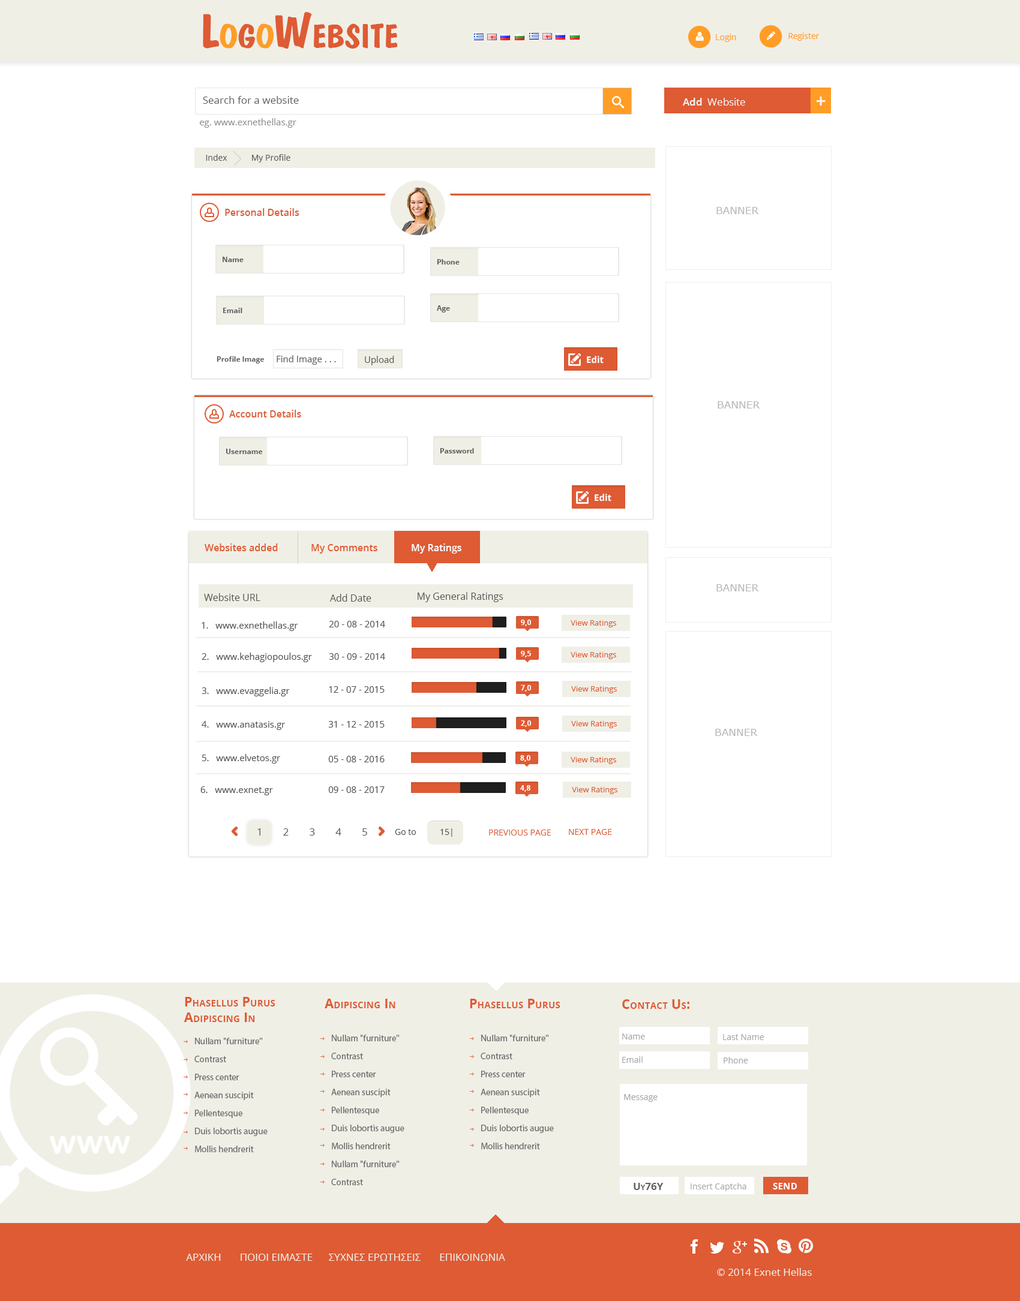
<style>
.page{position:relative;width:1020px;height:1301px;background:#ffffff}
.page>*{position:absolute;margin:0}
.t1{font:48px "DomkratBold";color:#de5b34;font-variant:small-caps}
.t2{font:48px "DomkratBold";color:#ff9d26;font-variant:small-caps}
.t3{font:8.4px "OpenSans";color:#ff9d26}
.t4{font:10.2px "OpenSans";color:#5e5d5d}
.t5{font:10.2px "OpenSans";color:#f5f5f5}
.t6{font:10.2px "OpenSans-Semibold";color:#f5f5f5}
.t7{font:13.2px "Verdana-Bold";color:#f5f5f5}
.t8{font:9px "OpenSans";color:#919090}
.t9{font:8.4px "OpenSans";color:#5e5d5d}
.t10{font:9.6px "OpenSans-Semibold";color:#de5b34}
.t11{font:10.2px "Verdana";color:#b8b8b8;text-transform:uppercase}
.t12{font:7.2px "OpenSans-Bold";color:#5e5b5b}
.t13{font:9px "OpenSans";color:#5e5b5b}
.t14{font:9px "OpenSans-Bold";color:#ffffff}
.t15{font:9.6px "OpenSans-Semibold";color:#ffffff}
.t16{font:9.6px "OpenSans";color:#535252}
.t17{font:9px "OpenSans";color:#535252}
.t18{font:7.2px "OpenSans-Bold";color:#ffffff}
.t19{font:7.8px "OpenSans";color:#de5b34}
.t20{font:10.2px "OpenSans";letter-spacing:2em;color:#545353}
.t21{font:8.4px "OpenSans";color:#545353}
.t22{font:8.4px "OpenSans";color:#de5b34}
.t23{font:13.2px "OpenSans-Bold";color:#de5b34;font-variant:small-caps}
.t24{font:9px/18px "MyriadPro-Regular";color:#6b6b6b}
.t25{font:8.4px "OpenSans";color:#a9a7a7}
.t26{font:10.2px "OpenSans-Bold";color:#625f5f;font-variant:small-caps}
.t27{font:13.2px "OpenSans-Bold";color:#ffffff;font-variant:small-caps}
.t28{font:10.2px "OpenSans";color:#f0efe6}
</style>
<div class="page">
<p class="t1" style="left:203px;top:12px;width:195px;height:37px">L<span class="t2">o</span>g<span class="t2">o</span>Website</p>
<p class="t3" style="left:716px;top:34px;width:20px;height:8px">Login</p>
<p class="t3" style="left:788px;top:32px;width:32px;height:9px">Register</p>
<p class="t4" style="left:203px;top:96px;width:96px;height:8px">Search for a website</p>
<p class="t5" style="left:683px;top:98px;width:62px;height:8px"><span class="t6">Add </span> Website</p>
<p class="t7" style="left:816px;top:97px;width:10px;height:9px">+</p>
<p class="t8" style="left:200px;top:118px;width:96px;height:10px">eg. www.exnethellas.gr</p>
<p class="t9" style="left:206px;top:154px;width:84px;height:9px">Index           My Profile</p>
<p class="t10" style="left:225px;top:208px;width:74px;height:8px">Personal Details</p>
<p class="t11" style="left:716px;top:207px;width:43px;height:7px">BANNER</p>
<p class="t12" style="left:223px;top:257px;width:21px;height:5px">Name</p>
<p class="t12" style="left:437px;top:259px;width:23px;height:6px">Phone</p>
<p class="t12" style="left:437px;top:305px;width:13px;height:8px">Age</p>
<p class="t12" style="left:223px;top:308px;width:19px;height:5px">Email</p>
<p class="t12" style="left:217px;top:356px;width:47px;height:8px">Profile Image</p>
<p class="t13" style="left:277px;top:355px;width:59px;height:10px">Find Image . . .</p>
<p class="t13" style="left:365px;top:356px;width:29px;height:9px">Upload</p>
<p class="t14" style="left:587px;top:356px;width:17px;height:8px">Edit</p>
<p class="t11" style="left:718px;top:401px;width:42px;height:8px">BANNER</p>
<p class="t10" style="left:229px;top:410px;width:72px;height:8px">Account Details</p>
<p class="t12" style="left:226px;top:449px;width:37px;height:5px">Username</p>
<p class="t12" style="left:440px;top:448px;width:34px;height:6px">Password</p>
<p class="t14" style="left:595px;top:494px;width:16px;height:8px">Edit</p>
<p class="t10" style="left:205px;top:544px;width:73px;height:7px">Websites added</p>
<p class="t10" style="left:311px;top:544px;width:66px;height:10px">My Comments</p>
<p class="t15" style="left:412px;top:544px;width:49px;height:10px">My Ratings</p>
<p class="t16" style="left:204px;top:593px;width:56px;height:8px">Website URL</p>
<p class="t16" style="left:418px;top:592px;width:85px;height:10px">My General Ratings</p>
<p class="t11" style="left:716px;top:584px;width:43px;height:8px">BANNER</p>
<p class="t16" style="left:330px;top:594px;width:41px;height:8px">Add Date</p>
<p class="t17" style="left:202px;top:622px;width:96px;height:9px">1.   www.exnethellas.gr</p>
<p class="t17" style="left:329px;top:621px;width:56px;height:7px">20 - 08 - 2014</p>
<p class="t18" style="left:521px;top:620px;width:10px;height:6px">9,0</p>
<p class="t19" style="left:571px;top:620px;width:45px;height:8px">View Ratings</p>
<p class="t17" style="left:202px;top:653px;width:110px;height:9px">2.   www.kehagiopoulos.gr</p>
<p class="t17" style="left:329px;top:653px;width:56px;height:7px">30 - 09 - 2014</p>
<p class="t18" style="left:521px;top:651px;width:10px;height:7px">9,5</p>
<p class="t19" style="left:571px;top:652px;width:45px;height:7px">View Ratings</p>
<p class="t17" style="left:202px;top:687px;width:88px;height:10px">3.   www.evaggelia.gr</p>
<p class="t17" style="left:329px;top:686px;width:56px;height:7px">12 - 07 - 2015</p>
<p class="t18" style="left:521px;top:685px;width:10px;height:7px">7,0</p>
<p class="t19" style="left:571px;top:686px;width:46px;height:8px">View Ratings</p>
<p class="t17" style="left:202px;top:721px;width:83px;height:9px">4.   www.anatasis.gr</p>
<p class="t17" style="left:328px;top:721px;width:57px;height:7px">31 - 12 - 2015</p>
<p class="t18" style="left:521px;top:721px;width:10px;height:6px">2,0</p>
<p class="t19" style="left:571px;top:721px;width:46px;height:7px">View Ratings</p>
<p class="t11" style="left:715px;top:729px;width:43px;height:7px">BANNER</p>
<p class="t17" style="left:202px;top:754px;width:78px;height:10px">5.   www.elvetos.gr</p>
<p class="t17" style="left:328px;top:756px;width:57px;height:7px">05 - 08 - 2016</p>
<p class="t18" style="left:520px;top:755px;width:10px;height:7px">8,0</p>
<p class="t19" style="left:571px;top:757px;width:45px;height:7px">View Ratings</p>
<p class="t18" style="left:520px;top:785px;width:10px;height:7px">4,8</p>
<p class="t17" style="left:200px;top:787px;width:73px;height:9px">6.   www.exnet.gr</p>
<p class="t17" style="left:328px;top:787px;width:57px;height:6px">09 - 08 - 2017</p>
<p class="t19" style="left:572px;top:787px;width:45px;height:7px">View Ratings</p>
<p class="t20" style="left:257px;top:829px;width:110px;height:7px">12345</p>
<p class="t21" style="left:395px;top:829px;width:21px;height:6px">Go to</p>
<p class="t21" style="left:440px;top:829px;width:12px;height:8px">15|</p>
<p class="t22" style="left:489px;top:830px;width:62px;height:6px">PREVIOUS PAGE</p>
<p class="t22" style="left:569px;top:829px;width:43px;height:6px">NEXT PAGE</p>
<p class="t23" style="left:184px;top:997px;width:91px;height:25px">Phasellus Purus <br> Adipiscing In</p>
<p class="t23" style="left:325px;top:999px;width:70px;height:10px">Adipiscing In</p>
<p class="t23" style="left:470px;top:999px;width:90px;height:10px">Phasellus Purus</p>
<p class="t23" style="left:622px;top:1000px;width:67px;height:9px">Contact Us:</p>
<p class="t24" style="left:194px;top:1038px;width:74px;height:115px">Nullam "furniture"<br>Contrast<br>Press center<br>Aenean suscipit<br>Pellentesque<br>Duis lobortis augue <br>Mollis hendrerit</p>
<p class="t24" style="left:331px;top:1035px;width:73px;height:151px">Nullam "furniture"<br>Contrast<br>Press center<br>Aenean suscipit<br>Pellentesque<br>Duis lobortis augue <br>Mollis hendrerit<br>Nullam "furniture"<br>Contrast</p>
<p class="t24" style="left:481px;top:1035px;width:73px;height:115px">Nullam "furniture"<br>Contrast<br>Press center<br>Aenean suscipit<br>Pellentesque<br>Duis lobortis augue <br>Mollis hendrerit</p>
<p class="t25" style="left:622px;top:1034px;width:23px;height:6px">Name</p>
<p class="t25" style="left:723px;top:1034px;width:41px;height:6px">Last Name</p>
<p class="t25" style="left:622px;top:1057px;width:21px;height:6px">Email</p>
<p class="t25" style="left:724px;top:1057px;width:24px;height:7px">Phone</p>
<p class="t25" style="left:624px;top:1094px;width:34px;height:8px">Message</p>
<p class="t26" style="left:634px;top:1183px;width:30px;height:7px">Uy76Y</p>
<p class="t25" style="left:691px;top:1183px;width:55px;height:9px">Insert Captcha</p>
<p class="t27" style="left:773px;top:1183px;width:24px;height:7px">send</p>
<p class="t28" style="left:186px;top:1254px;width:319px;height:7px">ΑΡΧΙΚΗ       ΠΟΙΟΙ ΕΙΜΑΣΤΕ      ΣΥΧΝΕΣ ΕΡΩΤΗΣΕΙΣ       ΕΠΙΚΟΙΝΩΝΙΑ</p>
<p class="t28" style="left:717px;top:1268px;width:95px;height:8px">© 2014 Exnet Hellas</p>
</div>
